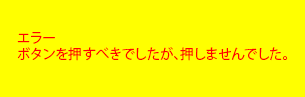
<style>
.page{position:relative;width:305px;height:97px;background:#ffff00}
.page>*{position:absolute;margin:0}
.t1{font:13.6px "KozGoPr6N-Regular";color:#ff0000}
</style>
<div class="page">
<p class="t1" style="left:17px;top:32px;width:271px;height:29px">エラー<br>ボタンを押すべきでしたが、押しませんでした。</p>
</div>
